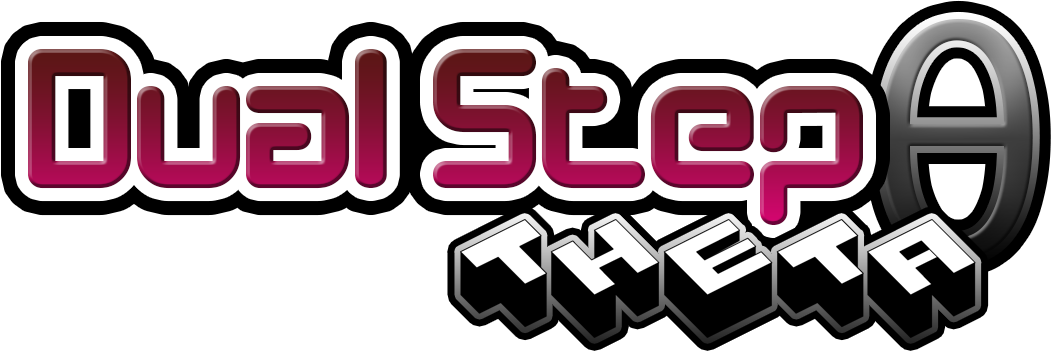
<style>
.page{position:relative;width:1051px;height:351px;background:#ffffff}
.page>*{position:absolute;margin:0}
.t1{font:200px "DesignerBlock"}
</style>
<div class="page">
<p class="t1" style="left:28px;top:49px;width:835px;height:176px">Dual Step</p>
</div>
